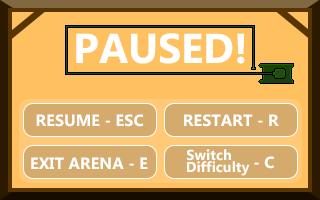
<style>
.page{position:relative;width:320px;height:200px;background:#ffc05f}
.page>*{position:absolute;margin:0}
.t1{font:41.7px "MicrosoftPhagsPa-Bold";color:#ffffff}
.t2{font:16.3px "MicrosoftPhagsPa-Bold";color:#ffffff}
.t3{font:14.6px "MicrosoftPhagsPa-Bold";color:#ffffff}
</style>
<div class="page">
<p class="t1" style="left:76px;top:33px;width:169px;height:31px">PAUSED!</p>
<p class="t2" style="left:36px;top:114px;width:107px;height:13px">RESUME - ESC</p>
<p class="t2" style="left:184px;top:114px;width:95px;height:13px">RESTART - R</p>
<p class="t3" style="left:187px;top:149px;width:44px;height:12px">Switch</p>
<p class="t2" style="left:31px;top:157px;width:117px;height:12px">EXIT ARENA - E</p>
<p class="t2" style="left:254px;top:156px;width:20px;height:13px">- C</p>
</div>
